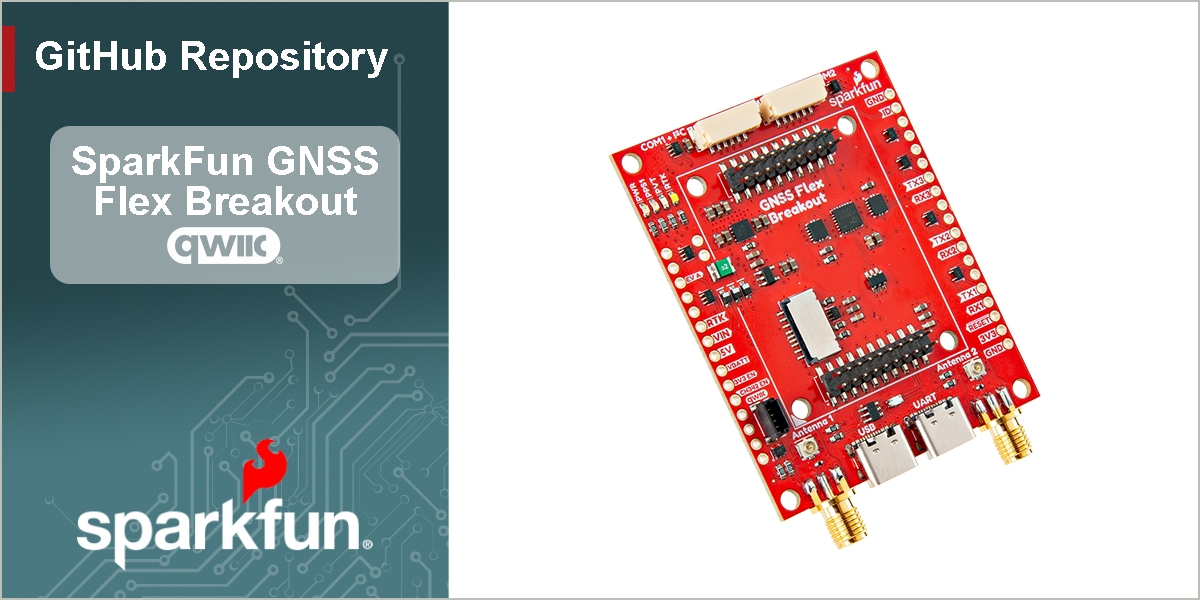
<style>
.page{position:relative;width:1200px;height:600px;background:#ffffff}
.page>*{position:absolute;margin:0}
.t1{font:40px "Arial-BoldMT";color:#ffffff}
</style>
<div class="page">
<p class="t1" style="left:36px;top:41px;width:352px;height:37px">GitHub Repository</p>
<p class="t1" style="left:72px;top:146px;width:306px;height:69px;text-align:center">SparkFun GNSS<br>Flex Breakout</p>
</div>
